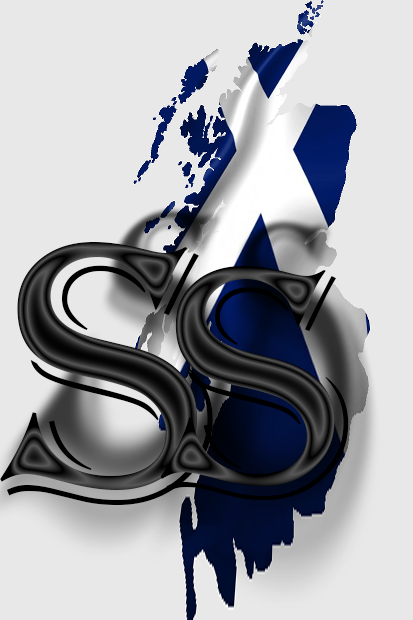
<style>
.page{position:relative;width:413px;height:620px;background:#e8e8e8}
.page>*{position:absolute;margin:0}
.t1{font:383.4px "Algerian"}
</style>
<div class="page">
<p class="t1" style="left:0px;top:241px;width:213px;height:264px">S</p>
</div>
